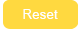
<style>
.page{position:relative;width:78px;height:29px;background:#ffd940}
.page>*{position:absolute;margin:0}
.t1{font:13.7px "ArialUnicodeMS";letter-spacing:0.02em;color:#ffffff;scale:0.95 1}
</style>
<div class="page">
<p class="t1" style="left:23px;top:9px;width:35px;height:10px">Reset</p>
</div>
